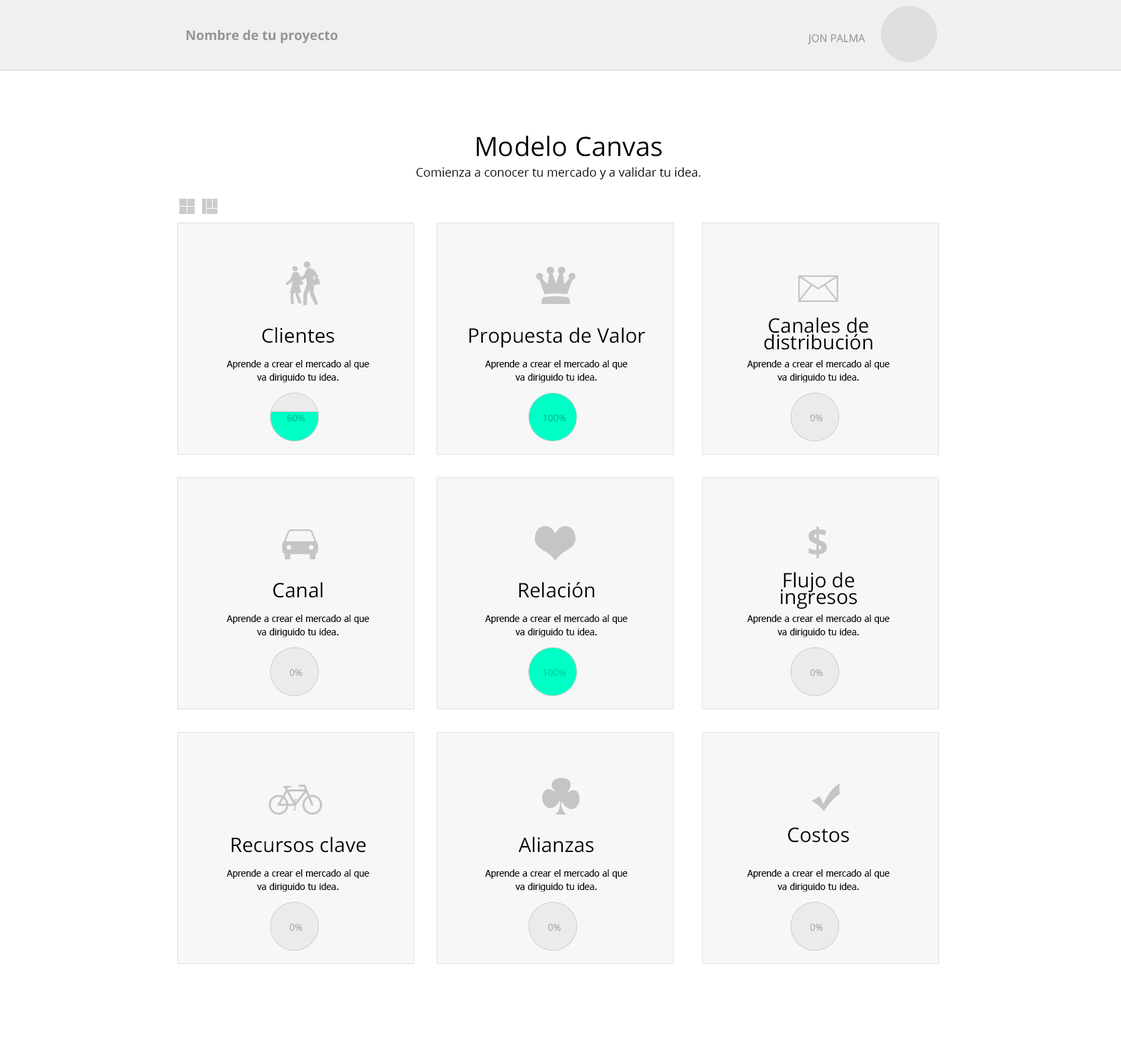
<style>
.page{position:relative;width:1121px;height:1064px;background:#ffffff}
.page>*{position:absolute;margin:0}
.t1{font:13.3px "OpenSans-Bold";color:#959595}
.t2{font:10.7px "OpenSans";color:#959595}
.t3{font:26.7px "OpenSans";color:#000000}
.t4{font:12px "OpenSans";color:#000000}
.t5{font:20px/16.7px "OpenSans";color:#000000}
.t6{font:20px "OpenSans";color:#000000}
.t7{font:9.3px/13.3px "Tahoma";color:#000000}
.t8{font:9.3px "OpenSans";color:#00b88e}
.t9{font:9.3px "OpenSans";color:#a9a9a9}
.t10{font:38.8px "OpenSans-Bold";color:#c5c5c5;scale:0.96 1}
.t11{font:9.3px "OpenSans";color:#00bd92}
</style>
<div class="page">
<p class="t1" style="left:186px;top:29px;width:151px;height:14px">Nombre de tu proyecto</p>
<p class="t2" style="left:807px;top:34px;width:58px;height:11px">JON PALMA</p>
<p class="t3" style="left:477px;top:135px;width:185px;height:22px">Modelo Canvas</p>
<p class="t4" style="left:416px;top:167px;width:285px;height:12px">Comienza a conocer tu mercado y a validar tu idea.</p>
<p class="t5" style="left:764px;top:317px;width:108px;height:33px;text-align:center">Canales de<br>distribución</p>
<p class="t6" style="left:262px;top:327px;width:72px;height:16px">Clientes</p>
<p class="t6" style="left:469px;top:327px;width:176px;height:21px">Propuesta de Valor</p>
<p class="t7" style="left:227px;top:360px;width:142px;height:23px;text-align:center">Aprende a crear el mercado al que va diriguido tu idea.</p>
<p class="t7" style="left:485px;top:360px;width:142px;height:23px;text-align:center">Aprende a crear el mercado al que va diriguido tu idea.</p>
<p class="t7" style="left:747px;top:360px;width:142px;height:23px;text-align:center">Aprende a crear el mercado al que va diriguido tu idea.</p>
<p class="t8" style="left:287px;top:415px;width:18px;height:6px">60%</p>
<p class="t8" style="left:543px;top:414px;width:23px;height:8px">100%</p>
<p class="t9" style="left:810px;top:414px;width:13px;height:8px">0%</p>
<p class="t10" style="left:808px;top:526px;width:19px;height:33px">$</p>
<p class="t5" style="left:781px;top:572px;width:76px;height:37px;text-align:center">Flujo de<br>ingresos</p>
<p class="t6" style="left:273px;top:582px;width:50px;height:16px">Canal</p>
<p class="t6" style="left:519px;top:582px;width:75px;height:16px">Relación</p>
<p class="t7" style="left:227px;top:615px;width:142px;height:22px;text-align:center">Aprende a crear el mercado al que va diriguido tu idea.</p>
<p class="t7" style="left:485px;top:615px;width:142px;height:22px;text-align:center">Aprende a crear el mercado al que va diriguido tu idea.</p>
<p class="t7" style="left:747px;top:615px;width:142px;height:22px;text-align:center">Aprende a crear el mercado al que va diriguido tu idea.</p>
<p class="t9" style="left:289px;top:669px;width:13px;height:8px">0%</p>
<p class="t11" style="left:543px;top:669px;width:23px;height:8px;opacity:0.8">100%</p>
<p class="t9" style="left:810px;top:669px;width:13px;height:8px">0%</p>
<p class="t6" style="left:787px;top:827px;width:62px;height:16px">Costos</p>
<p class="t6" style="left:231px;top:837px;width:135px;height:16px">Recursos clave</p>
<p class="t6" style="left:518px;top:837px;width:75px;height:16px">Alianzas</p>
<p class="t7" style="left:227px;top:869px;width:142px;height:23px;text-align:center">Aprende a crear el mercado al que va diriguido tu idea.</p>
<p class="t7" style="left:485px;top:869px;width:142px;height:23px;text-align:center">Aprende a crear el mercado al que va diriguido tu idea.</p>
<p class="t7" style="left:747px;top:869px;width:142px;height:23px;text-align:center">Aprende a crear el mercado al que va diriguido tu idea.</p>
<p class="t9" style="left:289px;top:923px;width:13px;height:8px">0%</p>
<p class="t9" style="left:548px;top:923px;width:13px;height:8px">0%</p>
<p class="t9" style="left:810px;top:923px;width:13px;height:8px">0%</p>
</div>
